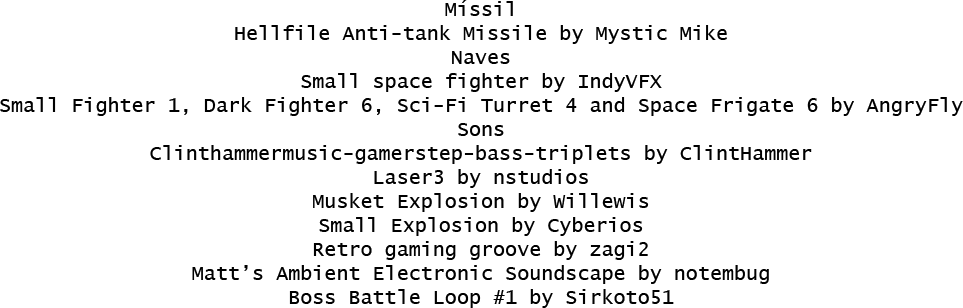
<style>
.page{position:relative;width:963px;height:308px;background:#ffffff}
.page>*{position:absolute;margin:0}
.t1{font:20px "LucidaConsole";color:#000000}
</style>
<div class="page">
<p class="t1" style="left:0px;top:0px;width:963px;height:308px;text-align:center">Míssil<br>Hellfile Anti-tank Missile by Mystic Mike<br>Naves<br>Small space fighter by IndyVFX<br>Small Fighter 1, Dark Fighter 6, Sci-Fi Turret 4 and Space Frigate 6 by AngryFly<br>Sons<br>Clinthammermusic-gamerstep-bass-triplets by ClintHammer<br>Laser3 by nstudios<br>Musket Explosion by Willewis<br>Small Explosion by Cyberios<br>Retro gaming groove by zagi2<br>Matt’s Ambient Electronic Soundscape by notembug<br>Boss Battle Loop #1 by Sirkoto51</p>
</div>
